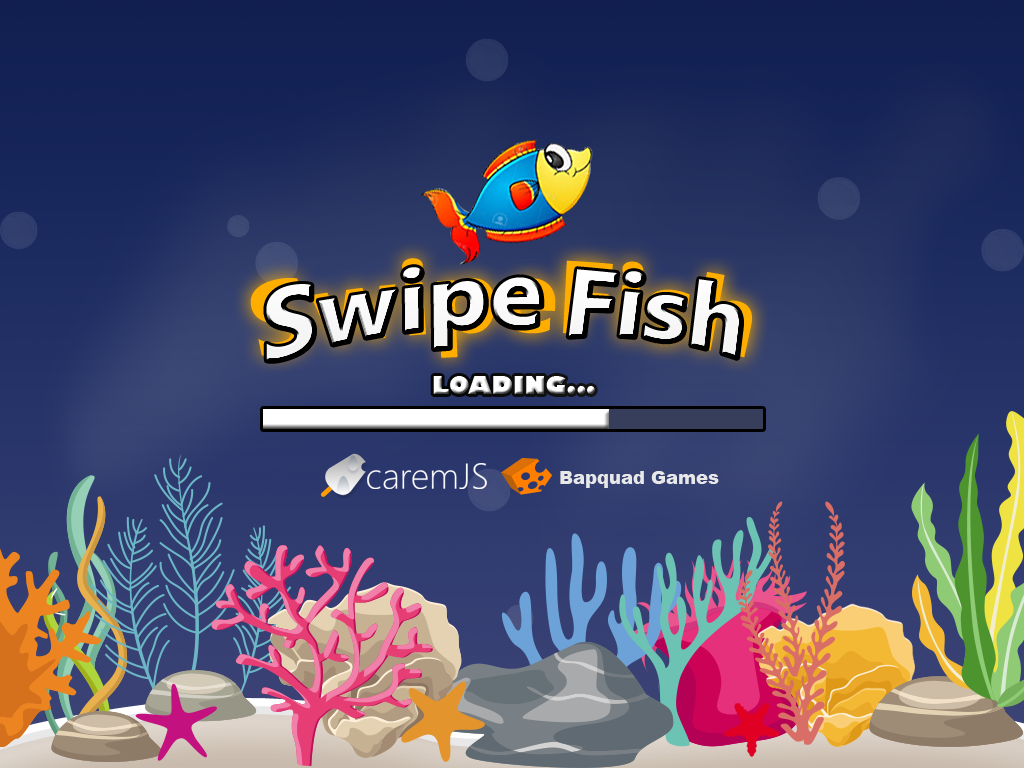
<style>
.page{position:relative;width:1024px;height:768px}
.page>*{position:absolute;margin:0}
.t1{font:104px "SegoeUI-Bold"}
.t2{font:105.7px "SegoeUI-Bold";color:#ffffff;scale:0.96 1}
.t3{font:99.7px "SegoeUI-Bold";color:#ffffff}
.t4{font:24px "GillSans-UltraBold";color:#ffffff}
.t5{font:36px "SegoeUI-Light";color:#ffffff}
.t6{font:18px "Arial-Black";color:#e8e8e8}
</style>
<div class="page">
<p class="t1" style="left:250px;top:258px;width:502px;height:100px">Swipe Fish</p>
<p class="t2" style="left:266px;top:267px;width:276px;height:94px;rotate:-6deg">Swipe</p>
<p class="t3" style="left:568px;top:269px;width:173px;height:89px;rotate:7deg">Fish</p>
<p class="t4" style="left:433px;top:376px;width:162px;height:18px">LOADING...</p>
<p class="t5" style="left:367px;top:463px;width:120px;height:26px">caremJS</p>
<p class="t6" style="left:560px;top:471px;width:159px;height:17px">Bapquad Games</p>
</div>
